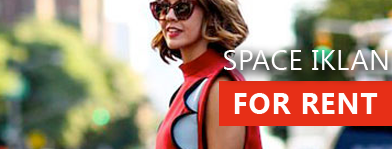
<style>
.page{position:relative;width:392px;height:149px}
.page>*{position:absolute;margin:0}
.t1{font:27.7px "SegoeUISymbol";letter-spacing:0.025em;color:#fefdfd}
.t2{font:29.4px "LaoUI-Bold";letter-spacing:0.025em;color:#fefdfd}
</style>
<div class="page">
<p class="t1" style="left:224px;top:50px;width:164px;height:20px">SPACE IKLAN</p>
<p class="t2" style="left:234px;top:93px;width:144px;height:21px">FOR RENT</p>
</div>
